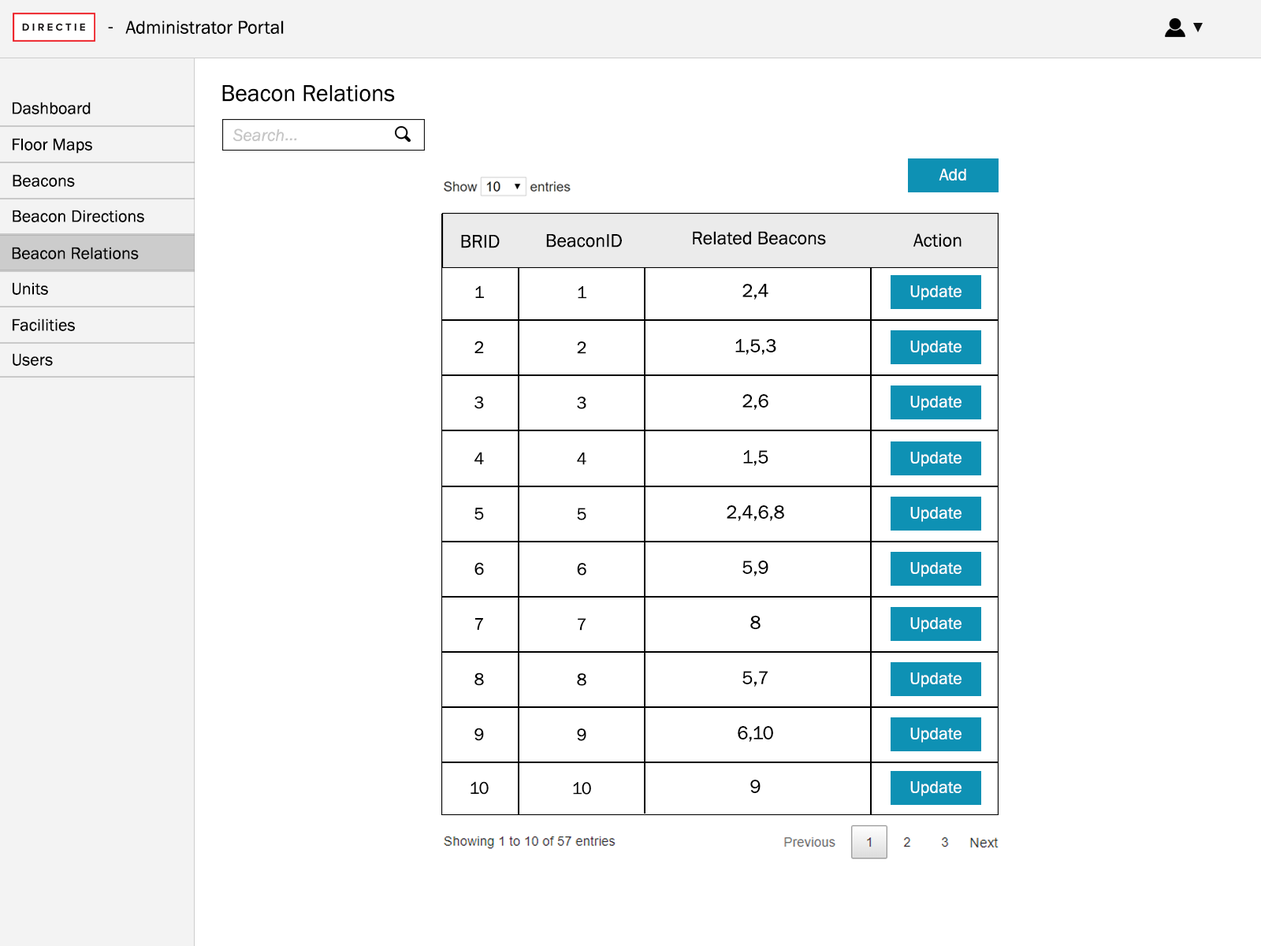
<style>
.page{position:relative;width:1261px;height:946px;background:#ffffff}
.page>*{position:absolute;margin:0}
.t1{font:18.9px "FranklinGothic-Book";color:#000000}
.t2{font:23.6px "FranklinGothic-Book";color:#000000}
.t3{font:17.3px "FranklinGothic-Book";color:#000000}
.t4{font:17.3px "FranklinGothic-Book";color:#ffffff}
</style>
<div class="page">
<p class="t1" style="left:108px;top:27px;width:5px;height:1px">-</p>
<p class="t1" style="left:125px;top:20px;width:159px;height:14px">Administrator Portal</p>
<p class="t2" style="left:222px;top:85px;width:173px;height:17px">Beacon Relations</p>
<p class="t3" style="left:13px;top:102px;width:78px;height:12px">Dashboard</p>
<p class="t3" style="left:13px;top:138px;width:79px;height:16px">Floor Maps</p>
<p class="t4" style="left:939px;top:169px;width:27px;height:11px">Add</p>
<p class="t3" style="left:13px;top:174px;width:62px;height:13px">Beacons</p>
<p class="t3" style="left:13px;top:210px;width:131px;height:12px">Beacon Directions</p>
<p class="t1" style="left:693px;top:231px;width:133px;height:14px">Related Beacons</p>
<p class="t1" style="left:913px;top:233px;width:48px;height:14px">Action</p>
<p class="t1" style="left:461px;top:235px;width:39px;height:13px">BRID</p>
<p class="t1" style="left:546px;top:234px;width:76px;height:13px">BeaconID</p>
<p class="t3" style="left:12px;top:247px;width:127px;height:12px">Beacon Relations</p>
<p class="t3" style="left:13px;top:282px;width:35px;height:13px">Units</p>
<p class="t3" style="left:475px;top:285px;width:9px;height:13px">1</p>
<p class="t3" style="left:578px;top:286px;width:8px;height:13px">1</p>
<p class="t1" style="left:742px;top:284px;width:26px;height:15px">2,4</p>
<p class="t4" style="left:910px;top:285px;width:51px;height:15px">Update</p>
<p class="t3" style="left:13px;top:318px;width:62px;height:13px">Facilities</p>
<p class="t3" style="left:474px;top:340px;width:10px;height:13px">2</p>
<p class="t3" style="left:577px;top:341px;width:9px;height:13px">2</p>
<p class="t1" style="left:735px;top:339px;width:41px;height:16px">1,5,3</p>
<p class="t4" style="left:910px;top:340px;width:51px;height:15px">Update</p>
<p class="t3" style="left:13px;top:353px;width:40px;height:13px">Users</p>
<p class="t3" style="left:474px;top:396px;width:10px;height:13px">3</p>
<p class="t3" style="left:577px;top:396px;width:9px;height:13px">3</p>
<p class="t1" style="left:742px;top:394px;width:26px;height:16px">2,6</p>
<p class="t4" style="left:910px;top:396px;width:51px;height:15px">Update</p>
<p class="t1" style="left:743px;top:450px;width:25px;height:16px">1,5</p>
<p class="t3" style="left:474px;top:452px;width:10px;height:12px">4</p>
<p class="t3" style="left:577px;top:452px;width:9px;height:13px">4</p>
<p class="t4" style="left:910px;top:452px;width:51px;height:15px">Update</p>
<p class="t3" style="left:474px;top:508px;width:10px;height:12px">5</p>
<p class="t3" style="left:577px;top:508px;width:9px;height:12px">5</p>
<p class="t1" style="left:727px;top:505px;width:57px;height:16px">2,4,6,8</p>
<p class="t4" style="left:910px;top:507px;width:51px;height:15px">Update</p>
<p class="t3" style="left:474px;top:562px;width:10px;height:13px">6</p>
<p class="t3" style="left:577px;top:563px;width:9px;height:12px">6</p>
<p class="t1" style="left:742px;top:560px;width:26px;height:16px">5,9</p>
<p class="t4" style="left:910px;top:562px;width:51px;height:15px">Update</p>
<p class="t3" style="left:475px;top:618px;width:8px;height:12px">7</p>
<p class="t3" style="left:578px;top:618px;width:8px;height:12px">7</p>
<p class="t1" style="left:750px;top:615px;width:10px;height:14px">8</p>
<p class="t4" style="left:910px;top:617px;width:51px;height:15px">Update</p>
<p class="t3" style="left:474px;top:672px;width:10px;height:14px">8</p>
<p class="t3" style="left:577px;top:673px;width:9px;height:13px">8</p>
<p class="t1" style="left:742px;top:671px;width:26px;height:15px">5,7</p>
<p class="t4" style="left:910px;top:672px;width:51px;height:15px">Update</p>
<p class="t1" style="left:738px;top:726px;width:35px;height:16px">6,10</p>
<p class="t3" style="left:474px;top:727px;width:10px;height:14px">9</p>
<p class="t3" style="left:577px;top:728px;width:9px;height:13px">9</p>
<p class="t4" style="left:910px;top:727px;width:51px;height:15px">Update</p>
<p class="t3" style="left:470px;top:781px;width:19px;height:13px">10</p>
<p class="t3" style="left:573px;top:782px;width:18px;height:12px">10</p>
<p class="t1" style="left:750px;top:779px;width:10px;height:14px">9</p>
<p class="t4" style="left:910px;top:781px;width:51px;height:15px">Update</p>
</div>
